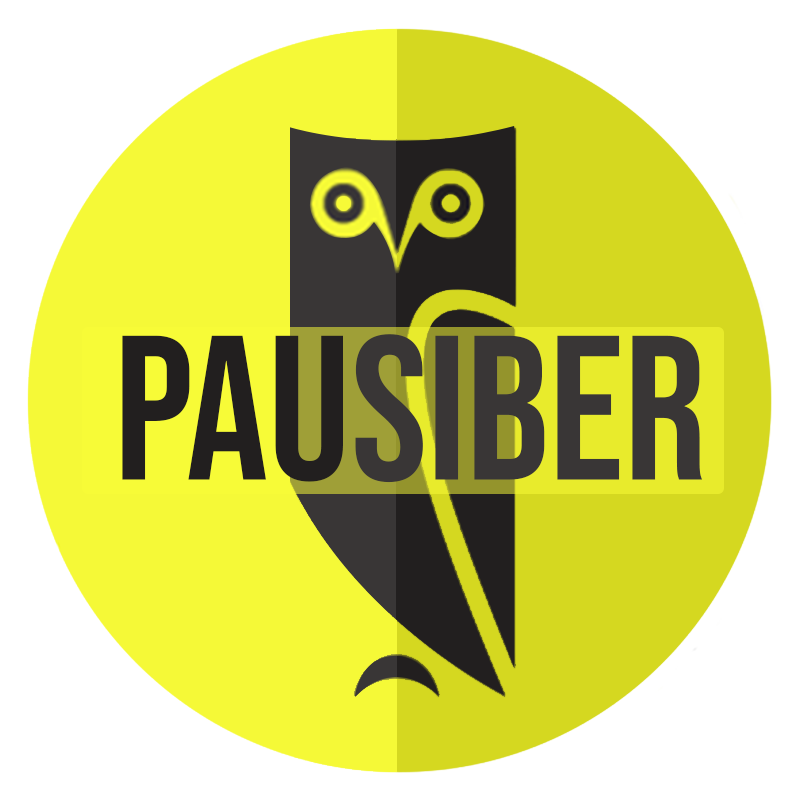
<style>
.page{position:relative;width:800px;height:800px;background:#ffffff}
.page>*{position:absolute;margin:0}
.t1{font:205.3px "BebasNeue-Regular";color:#393636}
.t2{font:205.3px "BebasNeue-Regular";color:#221f1f}
</style>
<div class="page">
<p class="t1" style="left:122px;top:334px;width:581px;height:149px"><span class="t2">pau</span>sıber</p>
</div>
